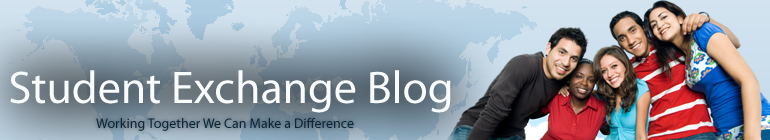
<style>
.page{position:relative;width:770px;height:140px}
.page>*{position:absolute;margin:0}
.t1{font:46px "MyriadPro-Regular";color:#f9fcfd}
.t2{font:14px "MyriadPro-Regular";color:#0b273b}
</style>
<div class="page">
<p class="t1" style="left:10px;top:70px;width:441px;height:43px">Student Exchange Blog</p>
<p class="t2" style="left:96px;top:118px;width:258px;height:13px">Working Together We Can Make a Difference</p>
</div>
